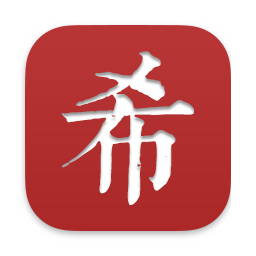
<style>
.page{position:relative;width:256px;height:256px;background:#ffffff}
.page>*{position:absolute;margin:0}
.t1{font:144px "TpldKhangXiDictDemo";color:#ffffff}
</style>
<div class="page">
<p class="t1" style="left:61px;top:51px;width:133px;height:154px">希</p>
</div>
